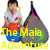
<style>
.page{position:relative;width:50px;height:50px;background:#ffffff}
.page>*{position:absolute;margin:0}
.t1{font:11px "MyriadPro-Regular";color:#f0ff00}
</style>
<div class="page">
<p class="t1" style="left:0px;top:28px;width:49px;height:21px">The Maia<br>Advanture</p>
</div>
